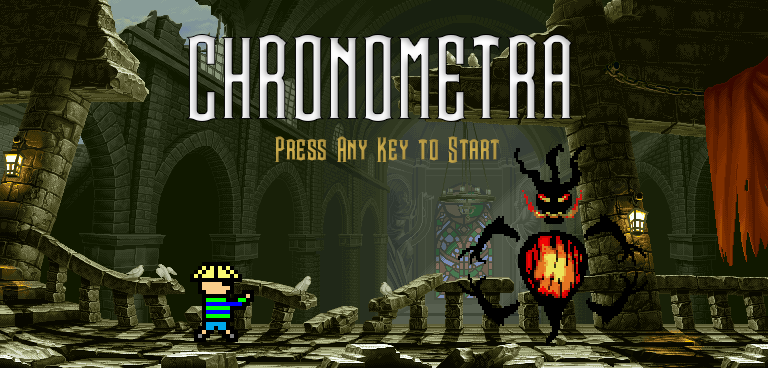
<style>
.page{position:relative;width:768px;height:368px}
.page>*{position:absolute;margin:0}
.t1{font:120px "Steamwreck"}
.t2{font:36px "Steamwreck";color:#c1a248}
</style>
<div class="page">
<p class="t1" style="left:186px;top:34px;width:388px;height:88px">CHRONOMETRA</p>
<p class="t2" style="left:275px;top:136px;width:225px;height:27px">Press Any Key to Start</p>
</div>
